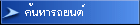
<style>
.page{position:relative;width:140px;height:25px}
.page>*{position:absolute;margin:0}
.t1{font:15.3px "EucrosiaDSE";color:#ffffff;scale:1.12 1}
</style>
<div class="page">
<p class="t1" style="left:25px;top:3px;width:60px;height:13px">¤é¹ËÒÃ¶Â¹µì</p>
</div>
